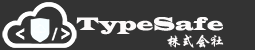
<style>
.page{position:relative;width:255px;height:50px;background:#333333}
.page>*{position:absolute;margin:0}
.t1{font:18.5px "LatinWide";color:#fcfafa}
.t2{font:14.6px "STXingkai";color:#fcfafa}
</style>
<div class="page">
<p class="t1" style="left:76px;top:17px;width:147px;height:18px">TypeSafe</p>
<p class="t2" style="left:167px;top:34px;width:57px;height:14px">株式会社</p>
</div>
